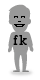
<style>
.page{position:relative;width:40px;height:80px;background:#ffffff}
.page>*{position:absolute;margin:0}
.t1{font:14px "RockwellStd";color:#000000;scale:0.95 1}
</style>
<div class="page">
<p class="t1" style="left:13px;top:35px;width:14px;height:10px">fk</p>
</div>
